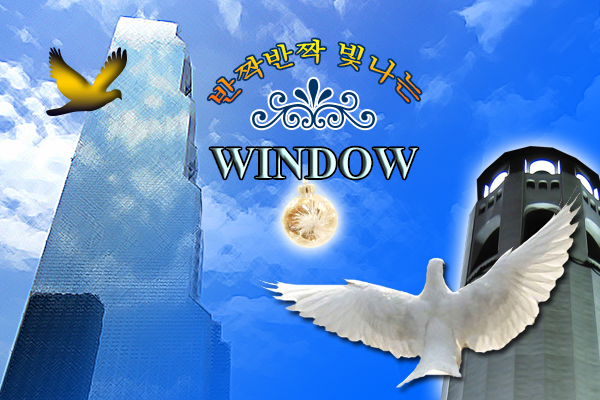
<style>
.page{position:relative;width:600px;height:400px}
.page>*{position:absolute;margin:0}
.t1{font:25px/20px "Batang"}
.t2{font:45px "TimesNewRomanPS-BoldMT"}
</style>
<div class="page">
<p class="t1" style="left:208px;top:39px;width:213px;height:64px">반짝반짝 빛나는</p>
<p class="t2" style="left:210px;top:147px;width:208px;height:32px">WINDOW</p>
</div>
